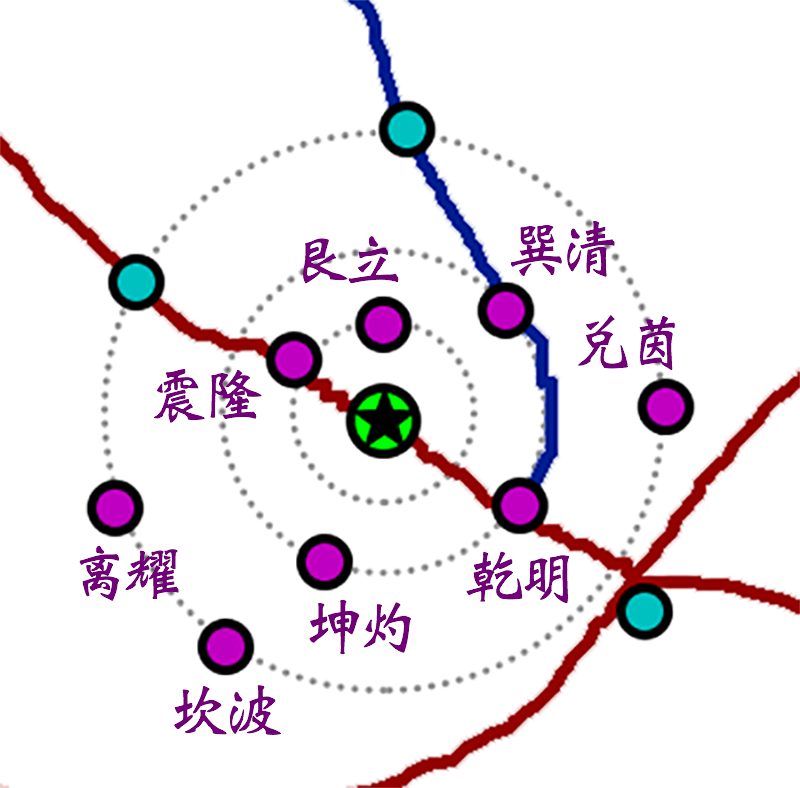
<style>
.page{position:relative;width:800px;height:788px;background:#ffffff}
.page>*{position:absolute;margin:0}
.t1{font:60px "Weibei-SC-Bold";letter-spacing:-0.1em;color:#710078}
</style>
<div class="page">
<p class="t1" style="left:510px;top:220px;width:105px;height:57px">巽清</p>
<p class="t1" style="left:302px;top:236px;width:97px;height:48px">艮立</p>
<p class="t1" style="left:578px;top:315px;width:97px;height:55px">兑茵</p>
<p class="t1" style="left:153px;top:368px;width:109px;height:55px">震隆</p>
<p class="t1" style="left:79px;top:545px;width:100px;height:56px">离耀</p>
<p class="t1" style="left:466px;top:551px;width:104px;height:53px">乾明</p>
<p class="t1" style="left:309px;top:599px;width:102px;height:56px">坤灼</p>
<p class="t1" style="left:174px;top:685px;width:107px;height:50px">坎波</p>
</div>
